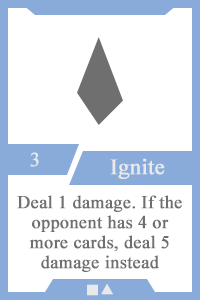
<style>
.page{position:relative;width:200px;height:300px;background:#ffffff}
.page>*{position:absolute;margin:0}
.t1{font:20px "TimesNewRomanPSMT";color:#e9e9e9;font-weight:bold}
.t2{font:22px "TimesNewRomanPSMT";color:#e9e9e9;font-weight:bold}
.t3{font:18px/20px "TimesNewRomanPSMT";color:#6f6f6f;font-weight:bold}
.t4{font:14px "AdobeHeitiStd-Regular";color:#e9e9e9;font-weight:bold}
</style>
<div class="page">
<p class="t1" style="left:30px;top:152px;width:9px;height:15px">3</p>
<p class="t2" style="left:110px;top:158px;width:55px;height:21px">Ignite</p>
<p class="t3" style="left:17px;top:195px;width:165px;height:77px;text-align:center">Deal 1 damage. If the opponent has 4 or<br>more cards, deal 5 damage instead</p>
<p class="t4" style="left:87px;top:284px;width:26px;height:12px">■▲</p>
</div>
